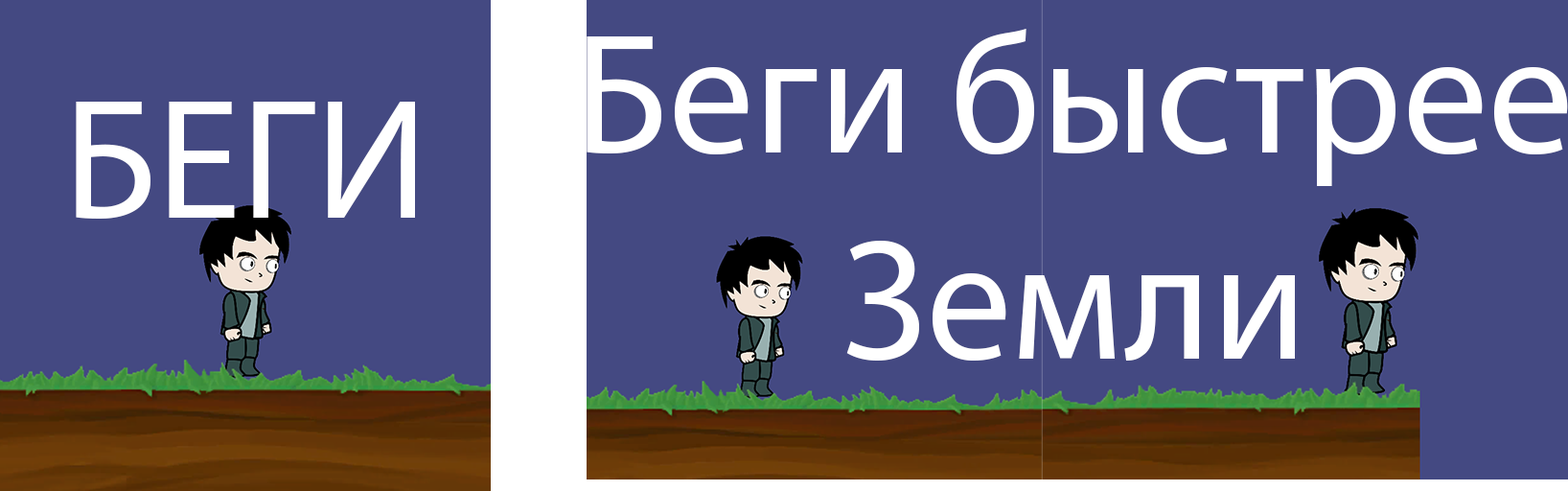
<style>
.page{position:relative;width:1568px;height:491px;background:#444982}
.page>*{position:absolute;margin:0}
.t1{font:171.7px "MyriadPro-Regular";color:#ffffff}
</style>
<div class="page">
<p class="t1" style="left:587px;top:29px;width:981px;height:332px;text-align:center">Беги быстрее<br>Земли</p>
<p class="t1" style="left:76px;top:102px;width:339px;height:117px">БЕГИ</p>
</div>
